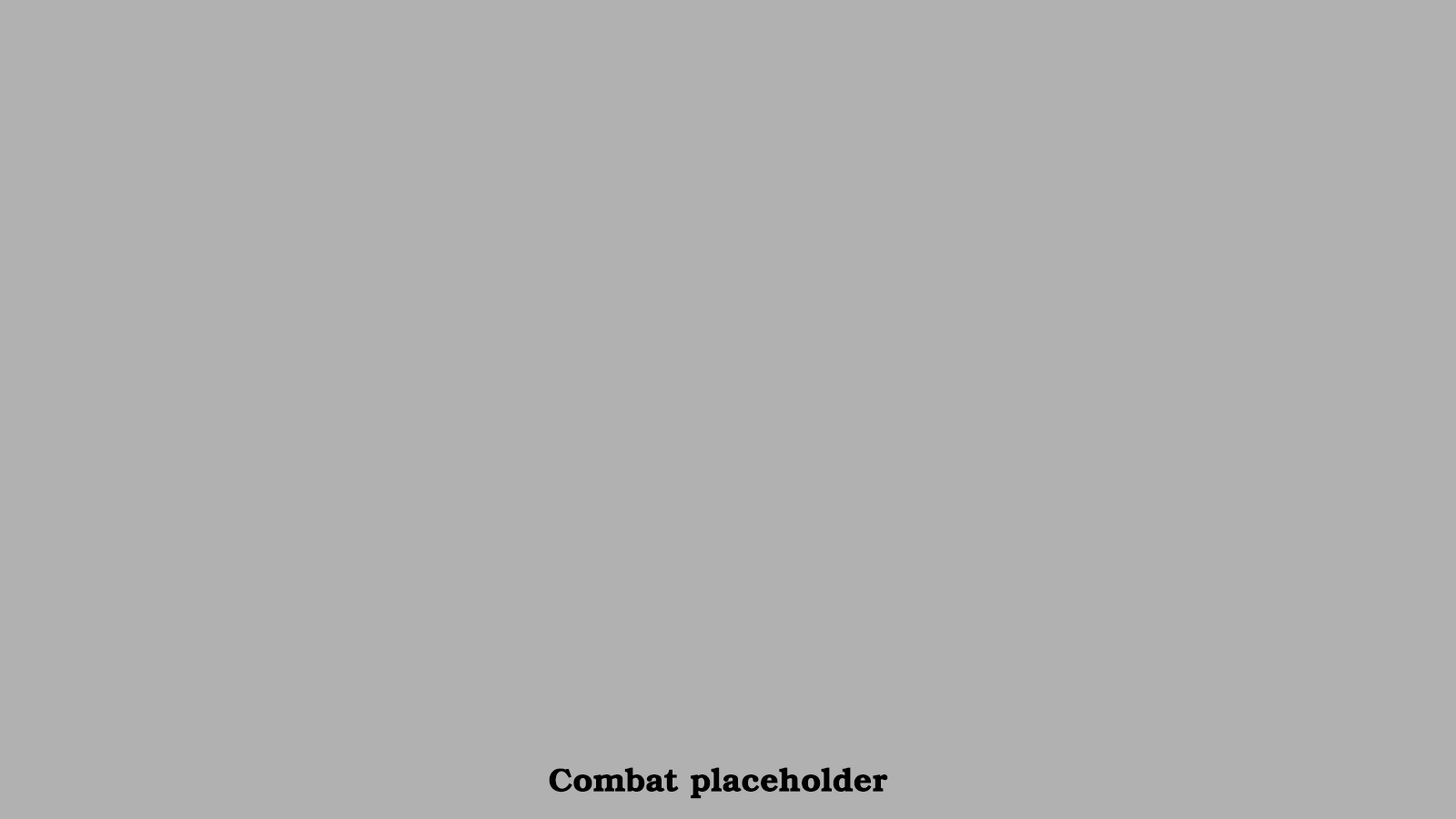
<style>
.page{position:relative;width:1456px;height:819px;background:#b1b1b1}
.page>*{position:absolute;margin:0}
.t1{font:32.8px "URWBookman-Demi";color:#000000}
</style>
<div class="page">
<p class="t1" style="left:549px;top:767px;width:339px;height:32px">Combat placeholder</p>
</div>
